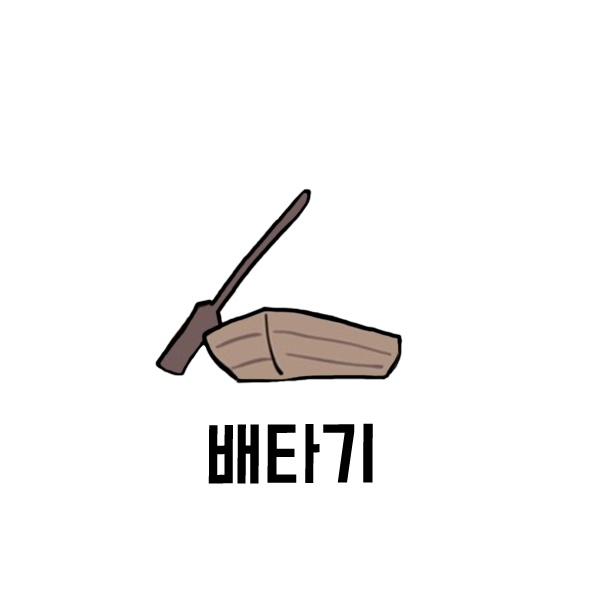
<style>
.page{position:relative;width:600px;height:600px;background:#ffffff}
.page>*{position:absolute;margin:0}
.t1{font:62.2px "BMDoHyeon";color:#000000;scale:0.96 1}
</style>
<div class="page">
<p class="t1" style="left:208px;top:423px;width:165px;height:61px">배타기</p>
</div>
